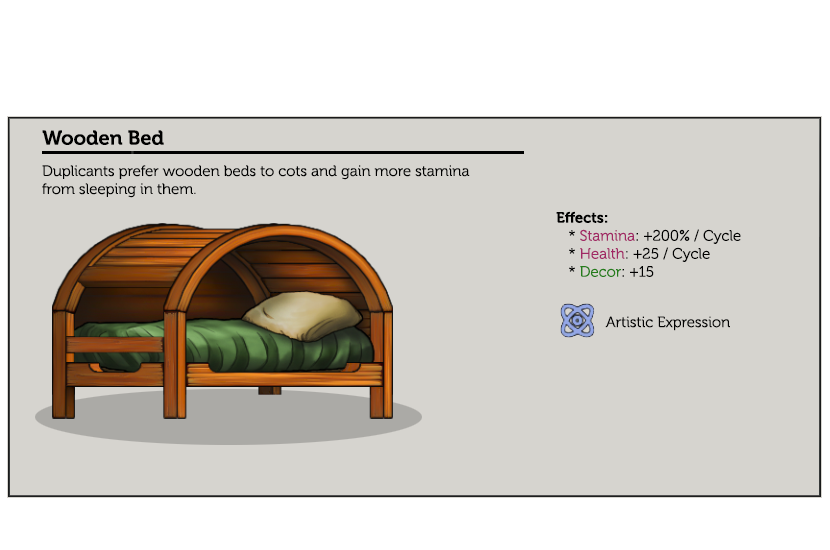
<style>
.page{position:relative;width:830px;height:550px;background:#d6d4cf}
.page>*{position:absolute;margin:0}
.t1{font:20px "Museo-700";color:#000000}
.t2{font:15px "Museo-300";color:#000000}
.t3{font:15px "Museo-700";color:#000000}
.t4{font:15px "Museo-300";color:#a12864}
.t5{font:15px "Museo-300";color:#247d1a}
.t6{font:15px "Museo-300";color:#020202}
</style>
<div class="page">
<p class="t1" style="left:42px;top:130px;width:122px;height:15px">Wooden Bed</p>
<p class="t2" style="left:42px;top:165px;width:428px;height:33px">Duplicants prefer wooden beds to cots and gain more stamina from sleeping in them.</p>
<p class="t2" style="left:556px;top:211px;width:185px;height:66px"><span class="t3">Effects:</span><br>   * <span class="t4">Stamina</span>: +200% / Cycle                    <br>   * <span class="t4">Health</span>: +25 / Cycle<br>   * <span class="t5">Decor</span>: +15</p>
<p class="t6" style="left:605px;top:316px;width:125px;height:15px">Artistic Expression</p>
</div>
